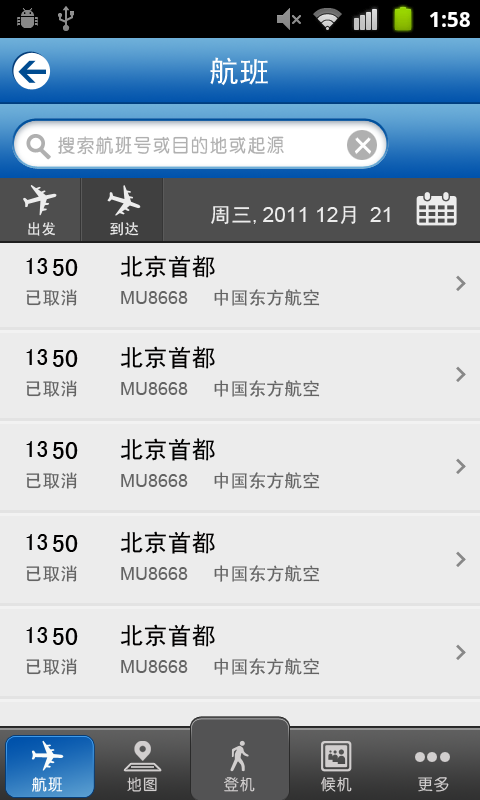
<style>
.page{position:relative;width:480px;height:800px;background:#ececec}
.page>*{position:absolute;margin:0}
.t1{font:30px "SimHei";color:#ffffff;text-transform:uppercase}
.t2{font:19px "CTZhongYuanSJ";color:#b0b0b0}
.t3{font:21px "ArialMT";color:#ececec}
.t4{font:21px "SimHei";color:#ececec}
.t5{font:14.7px "SimHei";color:#ececec}
.t6{font:24px "SimHei";color:#010000}
.t7{font:26px "SimHei";color:#010000}
.t8{font:18px "SimHei";color:#646464}
.t9{font:18px "ArialMT";color:#646464}
.t10{font:16px "CTZhongYuanSJ";color:#ffffff}
.t11{font:16px "CTZhongYuanSJ";color:#d1cece}
</style>
<div class="page">
<p class="t1" style="left:210px;top:57px;width:58px;height:29px">航班</p>
<p class="t2" style="left:58px;top:136px;width:226px;height:19px">搜索航班号或目的地或起源</p>
<p class="t3" style="left:211px;top:206px;width:179px;height:19px"><span class="t4">周三,</span>2011 12<span class="t4">月 </span>21</p>
<p class="t5" style="left:28px;top:222px;width:27px;height:14px">出发</p>
<p class="t5" style="left:110px;top:222px;width:29px;height:14px">到达</p>
<p class="t6" style="left:120px;top:255px;width:95px;height:23px">北京首都</p>
<p class="t6" style="left:26px;top:258px;width:22px;height:16px">13</p>
<p class="t7" style="left:53px;top:259px;width:25px;height:17px">50</p>
<p class="t8" style="left:26px;top:289px;width:51px;height:17px">已取消</p>
<p class="t9" style="left:121px;top:291px;width:67px;height:13px">MU8668</p>
<p class="t8" style="left:214px;top:289px;width:106px;height:17px">中国东方航空</p>
<p class="t6" style="left:26px;top:349px;width:22px;height:16px">13</p>
<p class="t7" style="left:53px;top:350px;width:25px;height:17px">50</p>
<p class="t6" style="left:120px;top:346px;width:95px;height:23px">北京首都</p>
<p class="t8" style="left:26px;top:380px;width:51px;height:17px">已取消</p>
<p class="t9" style="left:121px;top:382px;width:67px;height:13px">MU8668</p>
<p class="t8" style="left:214px;top:380px;width:106px;height:17px">中国东方航空</p>
<p class="t6" style="left:120px;top:438px;width:95px;height:23px">北京首都</p>
<p class="t6" style="left:26px;top:441px;width:22px;height:16px">13</p>
<p class="t7" style="left:53px;top:442px;width:25px;height:17px">50</p>
<p class="t8" style="left:26px;top:472px;width:51px;height:17px">已取消</p>
<p class="t8" style="left:214px;top:472px;width:106px;height:17px">中国东方航空</p>
<p class="t9" style="left:121px;top:474px;width:67px;height:13px">MU8668</p>
<p class="t6" style="left:26px;top:534px;width:22px;height:16px">13</p>
<p class="t6" style="left:120px;top:531px;width:95px;height:23px">北京首都</p>
<p class="t7" style="left:53px;top:535px;width:25px;height:17px">50</p>
<p class="t8" style="left:26px;top:565px;width:51px;height:17px">已取消</p>
<p class="t9" style="left:121px;top:567px;width:67px;height:13px">MU8668</p>
<p class="t8" style="left:214px;top:565px;width:106px;height:17px">中国东方航空</p>
<p class="t6" style="left:26px;top:627px;width:22px;height:16px">13</p>
<p class="t7" style="left:53px;top:628px;width:25px;height:17px">50</p>
<p class="t6" style="left:120px;top:624px;width:95px;height:23px">北京首都</p>
<p class="t8" style="left:26px;top:658px;width:51px;height:17px">已取消</p>
<p class="t9" style="left:121px;top:660px;width:67px;height:13px">MU8668</p>
<p class="t8" style="left:214px;top:658px;width:106px;height:17px">中国东方航空</p>
<p class="t10" style="left:32px;top:777px;width:31px;height:15px">航班</p>
<p class="t11" style="left:127px;top:777px;width:30px;height:15px">地图</p>
<p class="t11" style="left:224px;top:777px;width:31px;height:15px">登机</p>
<p class="t11" style="left:321px;top:777px;width:31px;height:15px">候机</p>
<p class="t11" style="left:418px;top:777px;width:31px;height:15px">更多</p>
</div>
